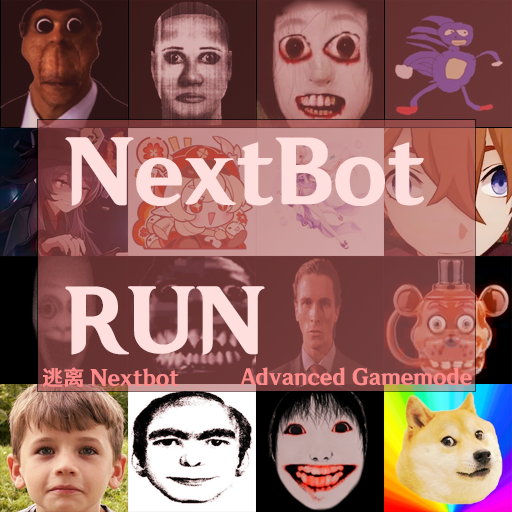
<style>
.page{position:relative;width:512px;height:512px}
.page>*{position:absolute;margin:0}
.t1{font:12px "HYWenHei-HEW";color:#ffdede}
.t2{font:21.3px "HYWenHei-HEW";color:#ff8a8a}
</style>
<div class="page">
<p class="t1" style="left:65px;top:137px;width:359px;height:218px">NextBot<br>RUN</p>
<p class="t2" style="left:42px;top:367px;width:137px;height:21px">逃离Nextbot</p>
<p class="t2" style="left:241px;top:367px;width:231px;height:19px">Advanced Gamemode</p>
</div>
